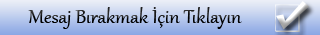
<style>
.page{position:relative;width:320px;height:35px}
.page>*{position:absolute;margin:0}
.t1{font:24px "Gabriola";color:#000000}
</style>
<div class="page">
<p class="t1" style="left:28px;top:7px;width:214px;height:22px">Mesaj Bırakmak İçin Tıklayın</p>
</div>
